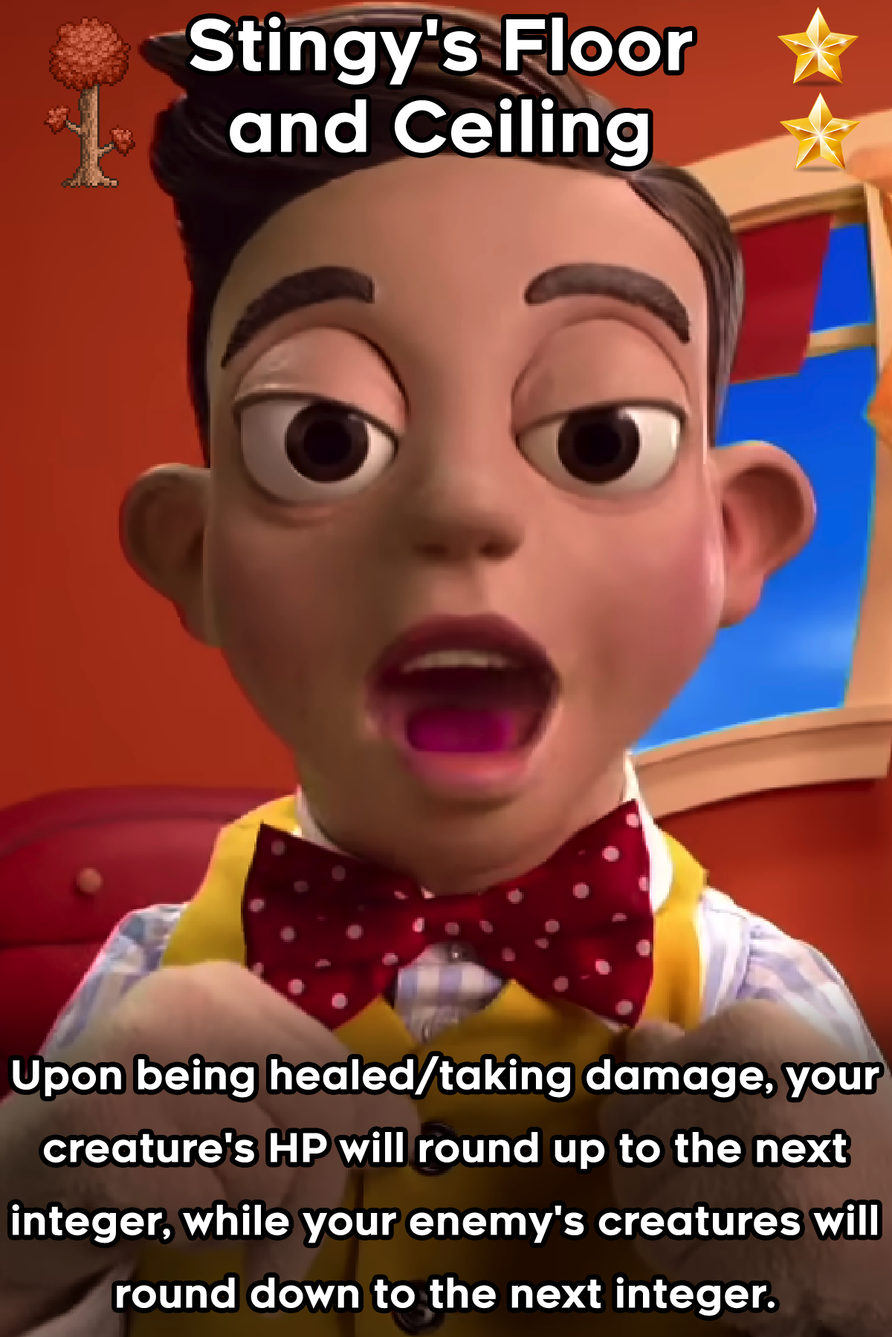
<style>
.page{position:relative;width:892px;height:1337px}
.page>*{position:absolute;margin:0}
.t1{font:118.9px/81.7px "Renogare-Regular";color:#ffffff}
.t2{font:67.6px/72.8px "Renogare-Regular";color:#ffffff}
</style>
<div class="page">
<p class="t1" style="left:189px;top:16px;width:503px;height:150px;text-align:center">Stingy's Floor<br>and Ceiling</p>
<p class="t2" style="left:12px;top:1057px;width:867px;height:260px;text-align:center">Upon being healed/taking damage, your creature's HP will round up to the next integer, while your enemy's creatures will round down to the next integer.</p>
</div>
